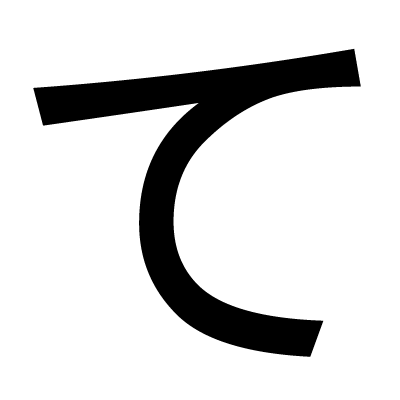
<style>
.page{position:relative;width:400px;height:400px;background:#ffffff}
.page>*{position:absolute;margin:0}
.t1{font:416.7px "MS-PGothic";color:#000000}
</style>
<div class="page">
<p class="t1" style="left:33px;top:48px;width:328px;height:309px">て</p>
</div>
